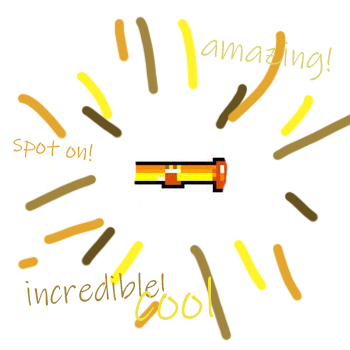
<style>
.page{position:relative;width:350px;height:350px;background:#ffffff}
.page>*{position:absolute;margin:0}
.t1{font:35.1px "InkFree";color:#dbd56f}
.t2{font:24.8px "InkFree";color:#e3a62f}
.t3{font:35.4px "InkFree";color:#a58531}
.t4{font:57.7px "InkFree";color:#f0e241}
</style>
<div class="page">
<p class="t1" style="left:201px;top:39px;width:131px;height:42px;rotate:7deg">amazing!</p>
<p class="t2" style="left:13px;top:138px;width:80px;height:24px;rotate:7deg">spot on!</p>
<p class="t3" style="left:25px;top:272px;width:141px;height:34px;rotate:-4deg">incredible!</p>
<p class="t4" style="left:135px;top:276px;width:79px;height:45px;rotate:-3deg">cool</p>
</div>
